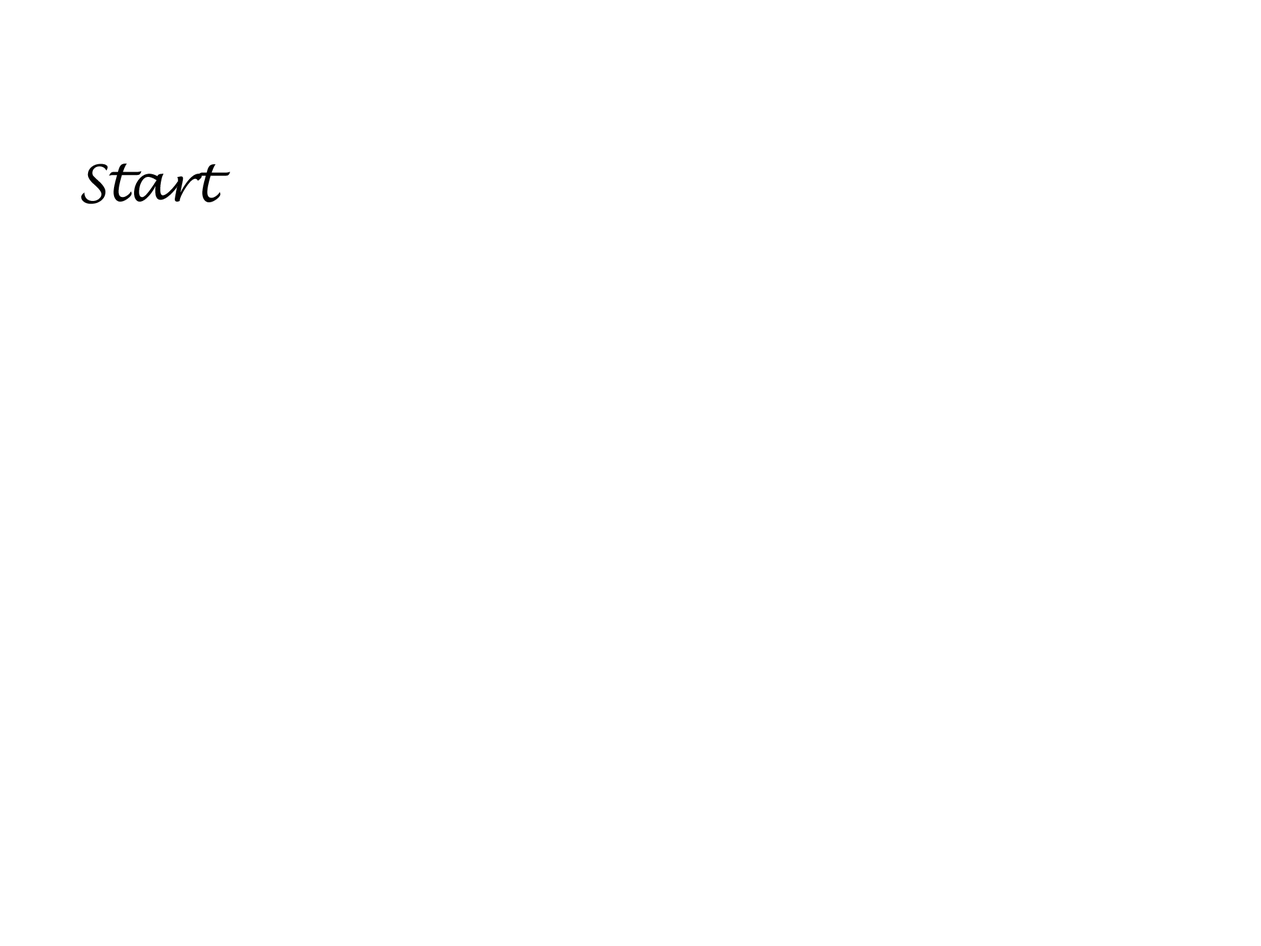
<style>
.page{position:relative;width:1261px;height:946px;background:#ffffff}
.page>*{position:absolute;margin:0}
.t1{font:50px "LucidaHandwriting-Italic";color:#000000}
</style>
<div class="page">
<p class="t1" style="left:81px;top:163px;width:149px;height:41px">Start</p>
</div>
